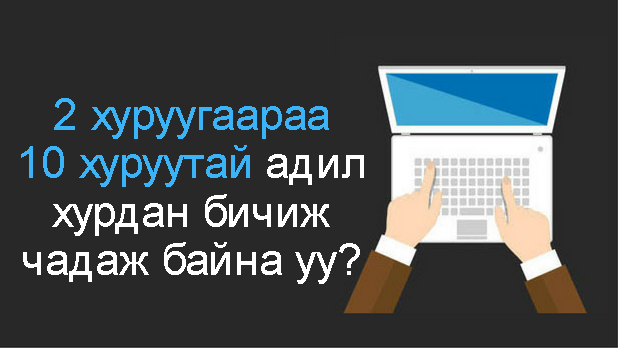
<style>
.page{position:relative;width:618px;height:348px;background:#282828}
.page>*{position:absolute;margin:0}
.t1{font:45.5px/48.3px "ArialMT";color:#ffffff}
.t2{font:45.5px/48.3px "ArialMT";color:#3bb4f7}
</style>
<div class="page">
<p class="t1" style="left:21px;top:98px;width:343px;height:186px;text-align:center"><span class="t2">2 хуруугаараа<br>10 хуруутай</span> адил<br>хурдан бичиж<br>чадаж байна уу?</p>
</div>
